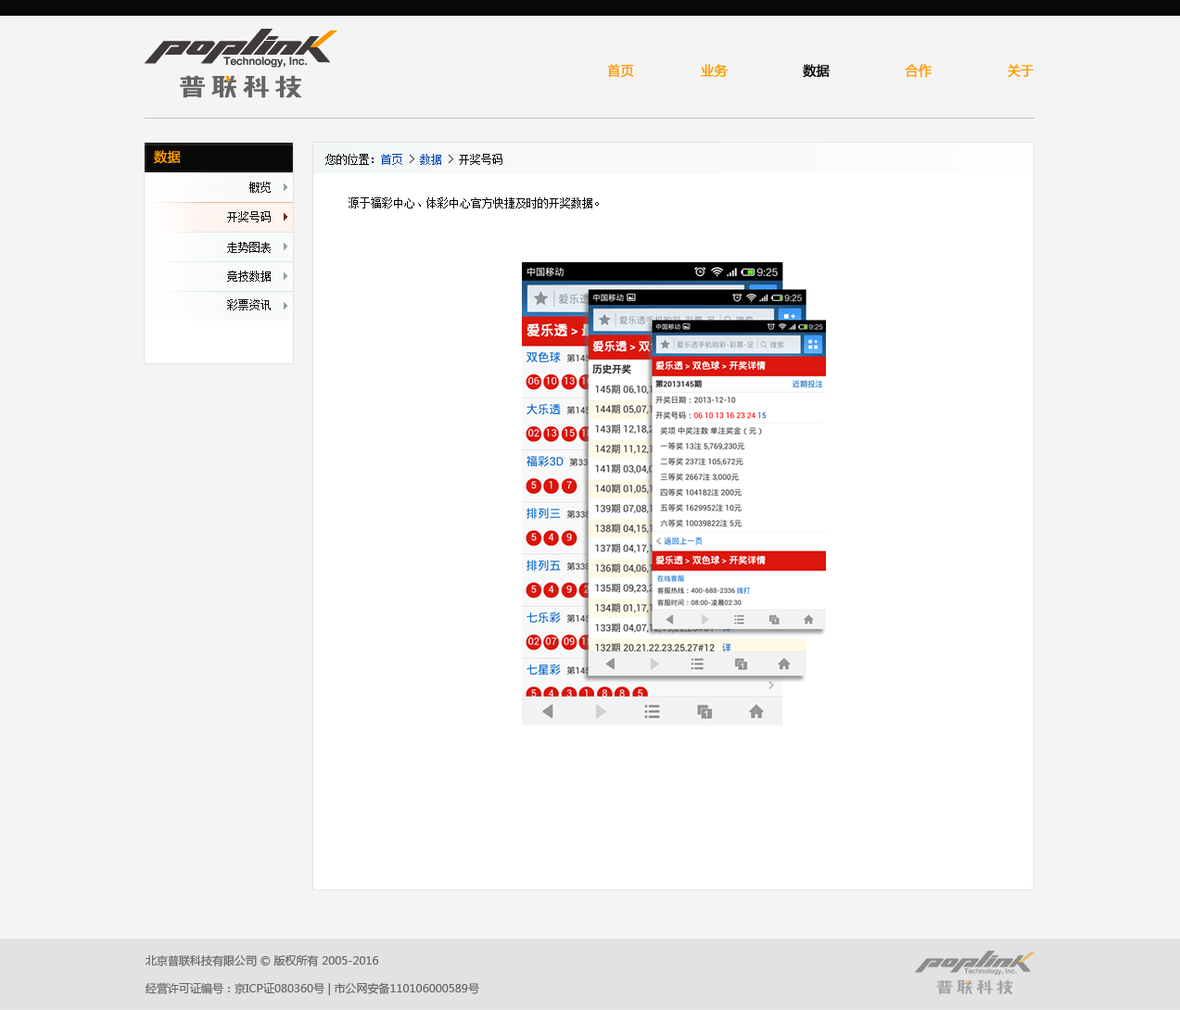
<style>
.page{position:relative;width:1180px;height:1010px;background:#f4f4f4}
.page>*{position:absolute;margin:0}
.t1{font:13px "MicrosoftYaHei";color:#fe9b00;text-transform:uppercase;font-weight:bold}
.t2{font:13px "MicrosoftYaHei";color:#090909;text-transform:uppercase;font-weight:bold}
.t3{font:13px "MicrosoftYaHei";color:#fe9b00;font-weight:bold}
.t4{font:11.1px "SimSun";color:#090909;text-transform:uppercase}
.t5{font:11.1px "SimSun";color:#0146af;text-transform:uppercase}
.t6{font:11.1px/27.8px "MicrosoftYaHei";color:#666666}
</style>
<div class="page">
<p class="t1" style="left:607px;top:64px;width:427px;height:14px">首页                业务                  <span class="t2">数据</span>                  合作                  关于</p>
<p class="t3" style="left:154px;top:150px;width:27px;height:14px">数据</p>
<p class="t4" style="left:325px;top:154px;width:177px;height:11px">您的位置：<span class="t5">首页 </span>&gt; <span class="t5">数据</span> &gt; 开奖号码</p>
<p class="t4" style="left:249px;top:182px;width:22px;height:11px">概览</p>
<p class="t4" style="left:349px;top:197px;width:250px;height:12px">源于福彩中心、体彩中心官方快捷及时的开奖数据。</p>
<p class="t4" style="left:227px;top:211px;width:44px;height:11px">开奖号码</p>
<p class="t4" style="left:227px;top:242px;width:44px;height:11px">走势图表</p>
<p class="t4" style="left:227px;top:271px;width:44px;height:11px">竞技数据</p>
<p class="t4" style="left:227px;top:299px;width:44px;height:12px">彩票资讯</p>
<p class="t6" style="left:146px;top:955px;width:334px;height:41px">北京普联科技有限公司 © 版权所有 2005-2016<br>经营许可证编号：京ICP证080360号 | 市公网安备110106000589号</p>
</div>
